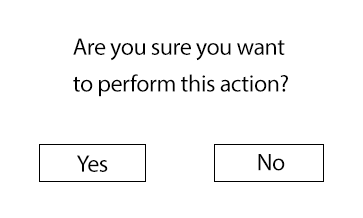
<style>
.page{position:relative;width:363px;height:218px;background:#ffffff}
.page>*{position:absolute;margin:0}
.t1{font:24px "MyriadPro-Regular";letter-spacing:-0.02em;color:#000000}
</style>
<div class="page">
<p class="t1" style="left:73px;top:38px;width:212px;height:23px">Are you sure you want</p>
<p class="t1" style="left:73px;top:74px;width:215px;height:23px">to perform this action?</p>
<p class="t1" style="left:77px;top:155px;width:31px;height:17px">Yes</p>
<p class="t1" style="left:258px;top:154px;width:27px;height:17px">No</p>
</div>
